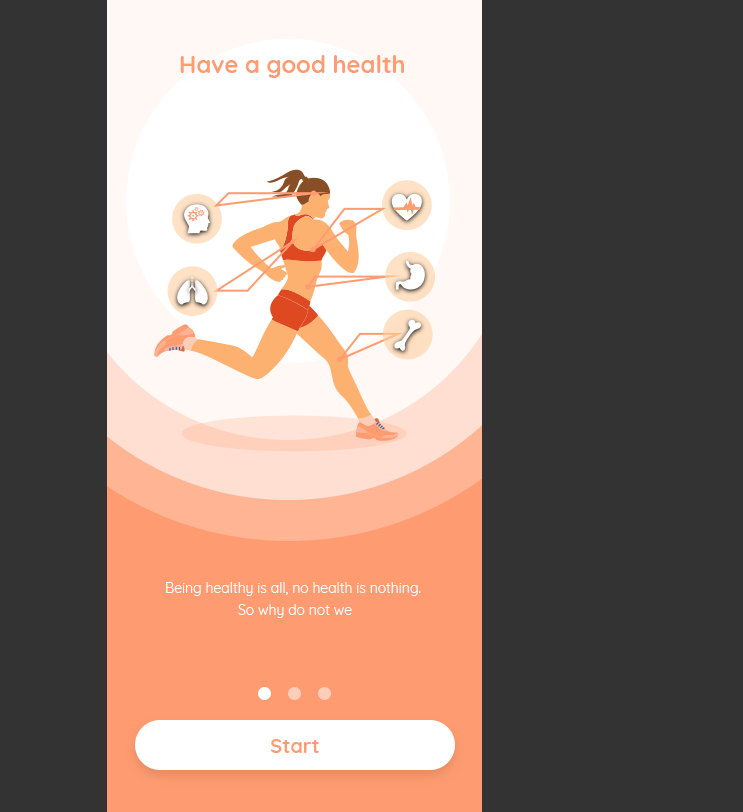
<style>
.page{position:relative;width:743px;height:812px;background:#333333}
.page>*{position:absolute;margin:0}
.t1{font:24px "Quicksand-Bold";color:#ff9b70}
.t2{font:14px/22px "Quicksand-Regular";color:#ffffff}
.t3{font:20px "Quicksand-Bold";color:#ff9b70}
</style>
<div class="page">
<p class="t1" style="left:180px;top:55px;width:224px;height:23px">Have a good health</p>
<p class="t2" style="left:166px;top:582px;width:255px;height:36px;text-align:center">Being healthy is all, no health is nothing. <br>So why do not we</p>
<p class="t3" style="left:271px;top:739px;width:48px;height:14px">Start</p>
</div>
